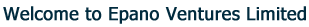
<style>
.page{position:relative;width:309px;height:27px;background:#ffffff}
.page>*{position:absolute;margin:0}
.t1{font:18px "Tahoma";color:#012b3e;font-weight:bold}
</style>
<div class="page">
<p class="t1" style="left:3px;top:4px;width:304px;height:20px">Welcome to Epano Ventures Limited</p>
</div>
